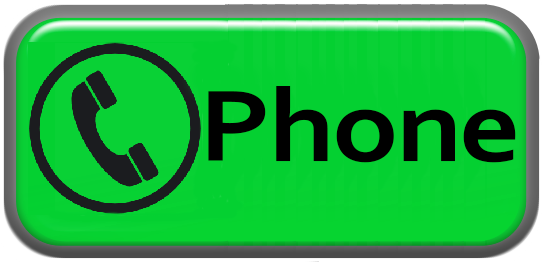
<style>
.page{position:relative;width:542px;height:262px;background:#04d031}
.page>*{position:absolute;margin:0}
.t1{font:105.6px "Corbel-Bold";letter-spacing:-0.025em;color:#000000;scale:1.14 1}
</style>
<div class="page">
<p class="t1" style="left:208px;top:86px;width:308px;height:77px">Phone</p>
</div>
